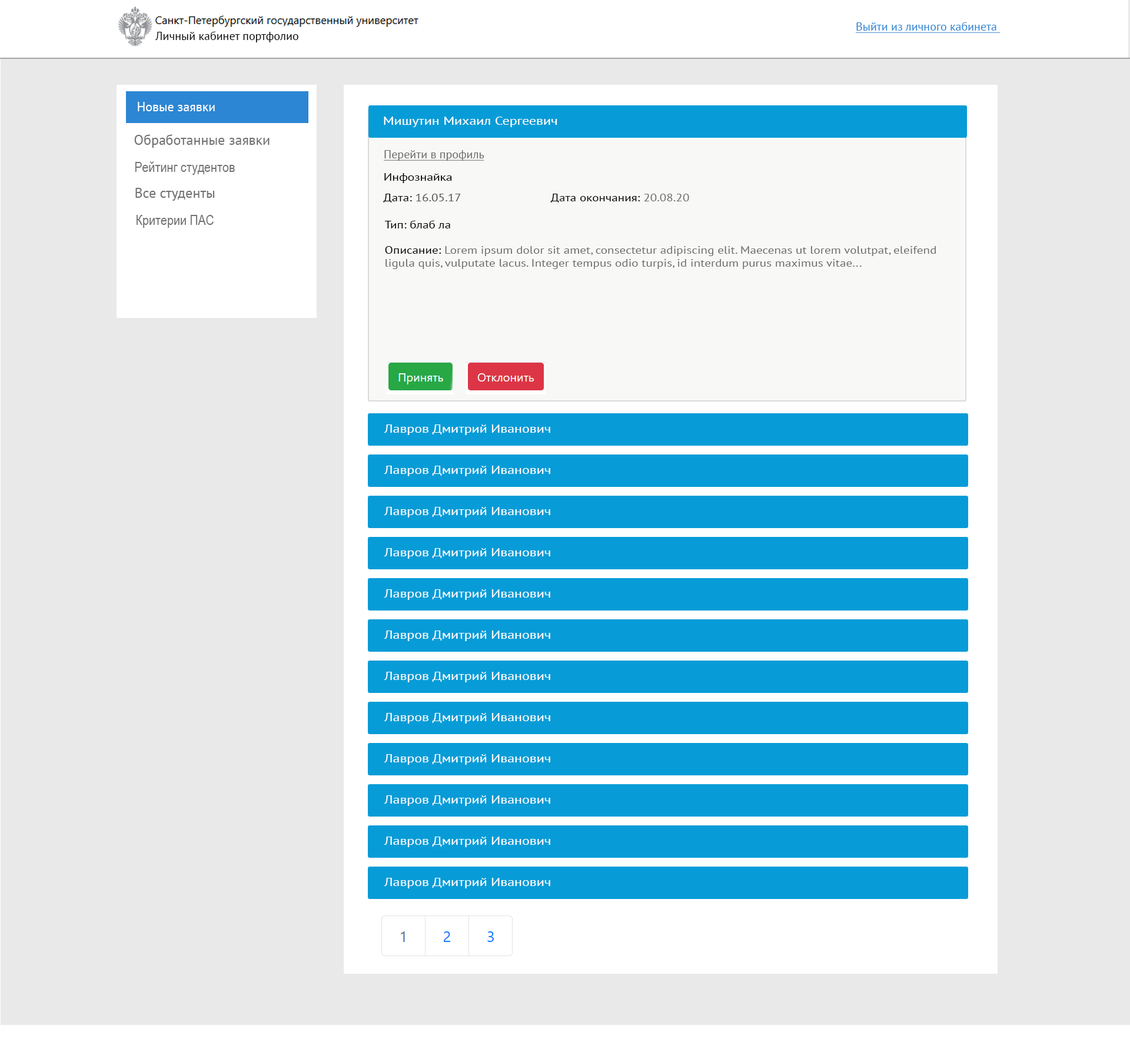
<style>
.page{position:relative;width:1130px;height:1055px;background:#e9e9e9}
.page>*{position:absolute;margin:0}
.t1{font:11.8px "PTSans-Regular";color:#2c86d3;text-decoration:underline}
.t2{font:11.8px "PTSans-Regular";color:#060606}
.t3{font:13px "PTSans-Regular";color:#ffffff}
.t4{font:11.8px "PTSans-Regular";color:#fefefe;scale:1.19 1}
.t5{font:14.1px "PTSans-Regular";color:#727272}
.t6{font:14.1px "ArialNarrow";color:#727272}
.t7{font:11.8px "PTSans-Regular";color:#6e6e6e;text-decoration:underline}
.t8{font:10.6px "PTSans-Regular";color:#000000;scale:1.19 1}
.t9{font:10.4px "PTSans-Regular";color:#535353;scale:1.19 1}
.t10{font:10.4px "PTSans-Regular";color:#000000;scale:1.19 1}
.t11{font:10.4px "PTSans-Regular";color:#6e6e6e;scale:1.19 1}
</style>
<div class="page">
<p class="t1" style="left:856px;top:22px;width:145px;height:11px">Выйти из личного кабинета</p>
<p class="t2" style="left:155px;top:31px;width:143px;height:11px">Личный кабинет портфолио</p>
<p class="t3" style="left:138px;top:102px;width:77px;height:9px">Новые заявки</p>
<p class="t4" style="left:384px;top:117px;width:174px;height:10px">Мишутин Михаил Сергеевич</p>
<p class="t5" style="left:134px;top:134px;width:136px;height:14px">Обработанные заявки</p>
<p class="t6" style="left:135px;top:161px;width:100px;height:14px">Рейтинг студентов</p>
<p class="t7" style="left:384px;top:150px;width:101px;height:11px">Перейти в профиль</p>
<p class="t8" style="left:384px;top:173px;width:68px;height:10px">Инфознайка</p>
<p class="t5" style="left:135px;top:188px;width:80px;height:13px">Все студенты</p>
<p class="t9" style="left:383px;top:194px;width:78px;height:9px"><span class="t10">Дата: </span>16.05.17</p>
<p class="t10" style="left:550px;top:194px;width:139px;height:9px">Дата окончания: <span class="t11">20.08.20</span></p>
<p class="t6" style="left:137px;top:215px;width:77px;height:13px">Критерии ПАС</p>
<p class="t9" style="left:384px;top:220px;width:66px;height:8px"><span class="t10">Тип: </span>блаб ла</p>
<p class="t11" style="left:385px;top:246px;width:552px;height:23px"><span class="t10">Описание: </span>Lorem ipsum dolor sit amet, consectetur adipiscing elit. Maecenas ut lorem volutpat, eleifend<br>ligula quis, vulputate lacus. Integer tempus odio turpis, id interdum purus maximus vitae...</p>
<p class="t4" style="left:384px;top:424px;width:166px;height:11px">Лавров Дмитрий Иванович</p>
<p class="t4" style="left:384px;top:466px;width:166px;height:10px">Лавров Дмитрий Иванович</p>
<p class="t4" style="left:384px;top:507px;width:166px;height:10px">Лавров Дмитрий Иванович</p>
<p class="t4" style="left:384px;top:548px;width:166px;height:11px">Лавров Дмитрий Иванович</p>
<p class="t4" style="left:384px;top:589px;width:166px;height:11px">Лавров Дмитрий Иванович</p>
<p class="t4" style="left:384px;top:631px;width:166px;height:10px">Лавров Дмитрий Иванович</p>
<p class="t4" style="left:384px;top:672px;width:166px;height:10px">Лавров Дмитрий Иванович</p>
<p class="t4" style="left:384px;top:713px;width:166px;height:11px">Лавров Дмитрий Иванович</p>
<p class="t4" style="left:384px;top:754px;width:166px;height:11px">Лавров Дмитрий Иванович</p>
<p class="t4" style="left:384px;top:795px;width:166px;height:11px">Лавров Дмитрий Иванович</p>
<p class="t4" style="left:384px;top:837px;width:166px;height:10px">Лавров Дмитрий Иванович</p>
<p class="t4" style="left:384px;top:878px;width:166px;height:10px">Лавров Дмитрий Иванович</p>
</div>
